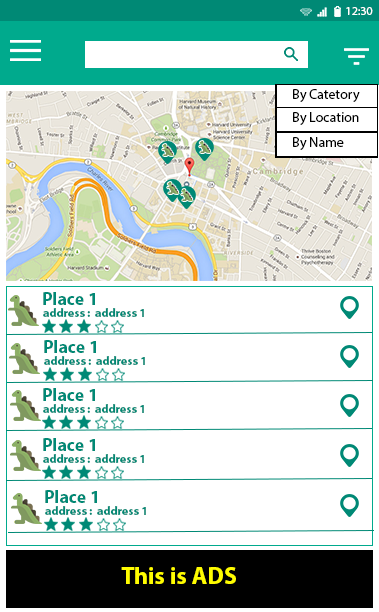
<style>
.page{position:relative;width:379px;height:612px;background:#ffffff}
.page>*{position:absolute;margin:0}
.t1{font:12px "MyriadPro-Regular";color:#ffffff}
.t2{font:14px "MyriadPro-Regular";color:#000000}
.t3{font:18px "MyriadPro-Bold";color:#008975}
.t4{font:12px "MyriadPro-Bold";color:#008975}
.t5{font:24px "MyriadPro-Bold";color:#fffc00}
</style>
<div class="page">
<p class="t1" style="left:346px;top:7px;width:27px;height:8px">12:30</p>
<p class="t1" style="left:346px;top:7px;width:27px;height:8px">12:30</p>
<p class="t2" style="left:293px;top:89px;width:67px;height:13px">By Catetory</p>
<p class="t2" style="left:293px;top:112px;width:66px;height:13px">By Location</p>
<p class="t2" style="left:293px;top:137px;width:51px;height:13px">By Name</p>
<p class="t3" style="left:43px;top:292px;width:52px;height:13px">Place 1</p>
<p class="t4" style="left:43px;top:308px;width:47px;height:9px">address :</p>
<p class="t4" style="left:95px;top:308px;width:49px;height:9px">address 1</p>
<p class="t3" style="left:44px;top:340px;width:52px;height:13px">Place 1</p>
<p class="t4" style="left:44px;top:356px;width:47px;height:9px">address :</p>
<p class="t4" style="left:96px;top:356px;width:49px;height:9px">address 1</p>
<p class="t3" style="left:43px;top:388px;width:52px;height:13px">Place 1</p>
<p class="t4" style="left:43px;top:404px;width:47px;height:9px">address :</p>
<p class="t4" style="left:95px;top:404px;width:49px;height:9px">address 1</p>
<p class="t3" style="left:43px;top:438px;width:52px;height:13px">Place 1</p>
<p class="t4" style="left:43px;top:454px;width:47px;height:9px">address :</p>
<p class="t4" style="left:95px;top:454px;width:49px;height:9px">address 1</p>
<p class="t3" style="left:45px;top:490px;width:52px;height:13px">Place 1</p>
<p class="t4" style="left:45px;top:506px;width:47px;height:9px">address :</p>
<p class="t4" style="left:97px;top:506px;width:49px;height:9px">address 1</p>
<p class="t5" style="left:121px;top:567px;width:115px;height:17px">This is ADS</p>
</div>
